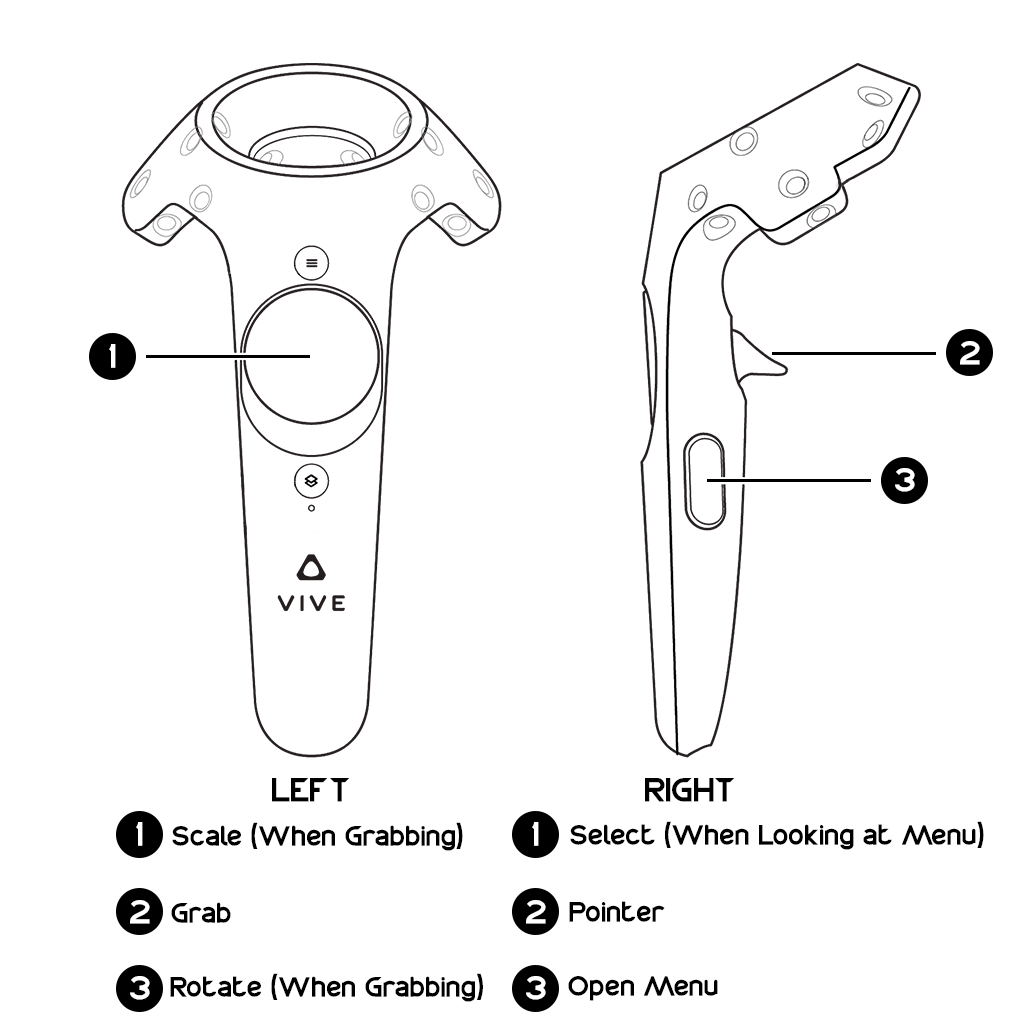
<style>
.page{position:relative;width:1024px;height:1024px;background:#ffffff}
.page>*{position:absolute;margin:0}
.t1{font:36px "Chemistry";color:#ffffff}
.t2{font:36px "Chemistry";color:#010101}
.t3{font:30px "Chemistry";color:#000000}
</style>
<div class="page">
<p class="t1" style="left:960px;top:341px;width:20px;height:24px">2</p>
<p class="t1" style="left:109px;top:344px;width:7px;height:24px">1</p>
<p class="t1" style="left:895px;top:468px;width:20px;height:24px">3</p>
<p class="t2" style="left:272px;top:778px;width:78px;height:24px">LEFT</p>
<p class="t2" style="left:645px;top:778px;width:90px;height:24px">RIGHT</p>
<p class="t1" style="left:136px;top:822px;width:7px;height:24px">1</p>
<p class="t3" style="left:172px;top:822px;width:291px;height:29px">Scale (When Grabbing)</p>
<p class="t1" style="left:532px;top:822px;width:7px;height:24px">1</p>
<p class="t3" style="left:570px;top:821px;width:414px;height:29px">Select (When Looking at Menu)</p>
<p class="t1" style="left:130px;top:900px;width:20px;height:24px">2</p>
<p class="t3" style="left:171px;top:902px;width:60px;height:21px">Grab</p>
<p class="t1" style="left:526px;top:900px;width:20px;height:24px">2</p>
<p class="t3" style="left:569px;top:901px;width:96px;height:21px">Pointer</p>
<p class="t1" style="left:130px;top:976px;width:20px;height:24px">3</p>
<p class="t3" style="left:170px;top:973px;width:313px;height:29px">Rotate (When Grabbing)</p>
<p class="t1" style="left:526px;top:976px;width:20px;height:24px">3</p>
<p class="t3" style="left:568px;top:976px;width:150px;height:25px">Open Menu</p>
</div>
